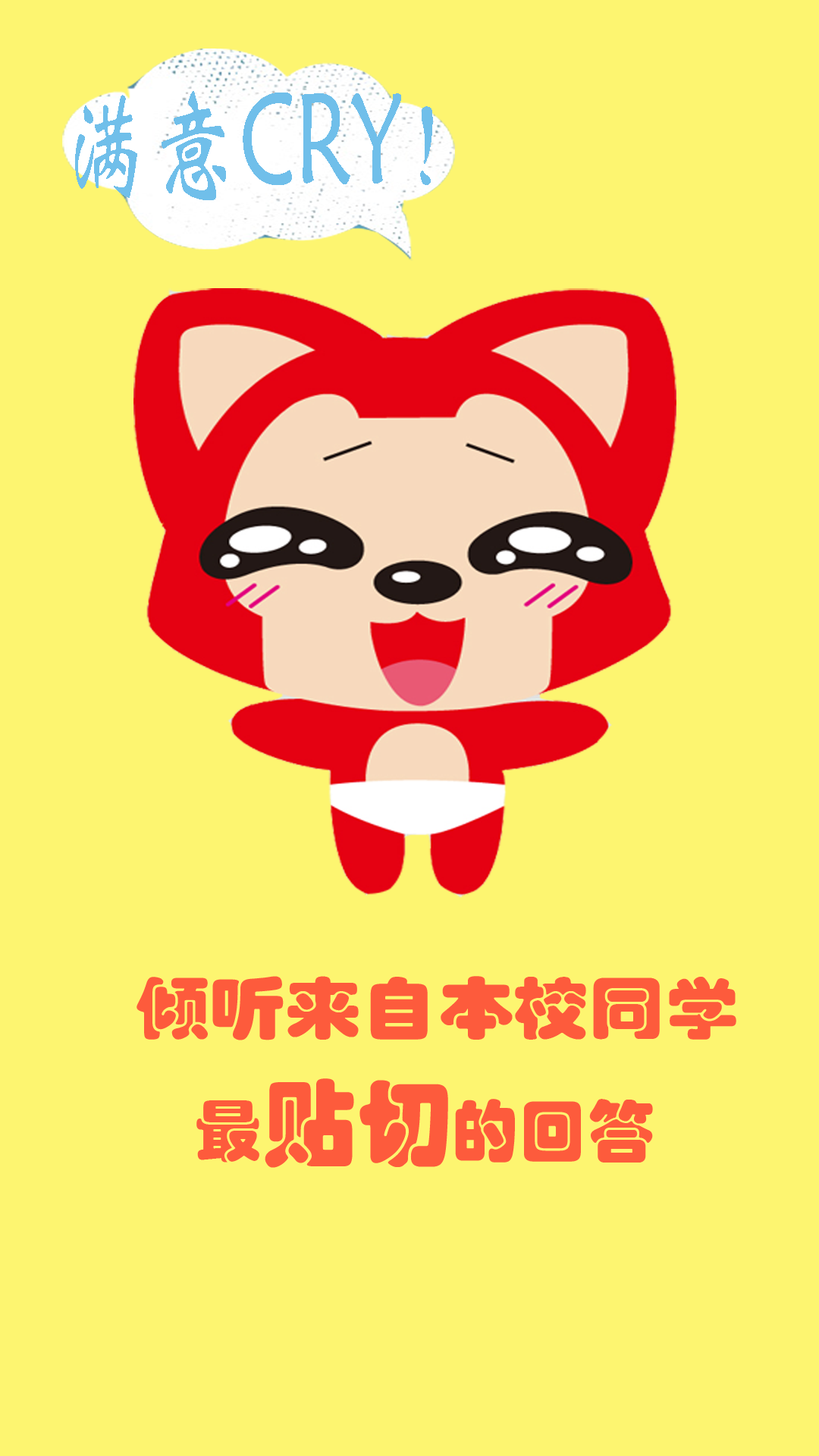
<style>
.page{position:relative;width:819px;height:1456px;background:#fdf570}
.page>*{position:absolute;margin:0}
.t1{font:127.2px "STXinwei";color:#70bfea;scale:0.69 1}
.t2{font:67.4px "STHupo";color:#fd5b3c;scale:1.12 1}
.t3{font:67.4px "STHupo";color:#fd5b3c}
.t4{font:94.8px "STHupo";color:#fd5b3c}
</style>
<div class="page">
<p class="t1" style="left:75px;top:91px;width:358px;height:109px">满意CRY！</p>
<p class="t2" style="left:136px;top:976px;width:600px;height:64px">倾听来自本校同学</p>
<p class="t3" style="left:196px;top:1078px;width:457px;height:90px">最<span class="t4">贴切</span>的回答</p>
</div>
